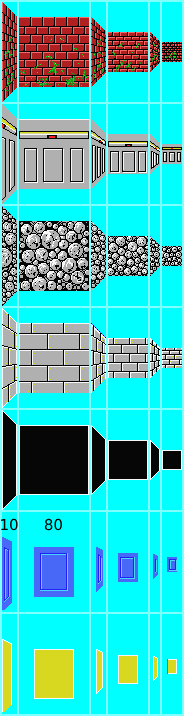
<style>
.page{position:relative;width:184px;height:716px;background:#00ffff}
.page>*{position:absolute;margin:0}
.t1{font:15px "DejaVuSans";color:#000000}
</style>
<div class="page">
<p class="t1" style="left:1px;top:518px;width:17px;height:13px">10</p>
<p class="t1" style="left:44px;top:518px;width:18px;height:13px">80</p>
</div>
